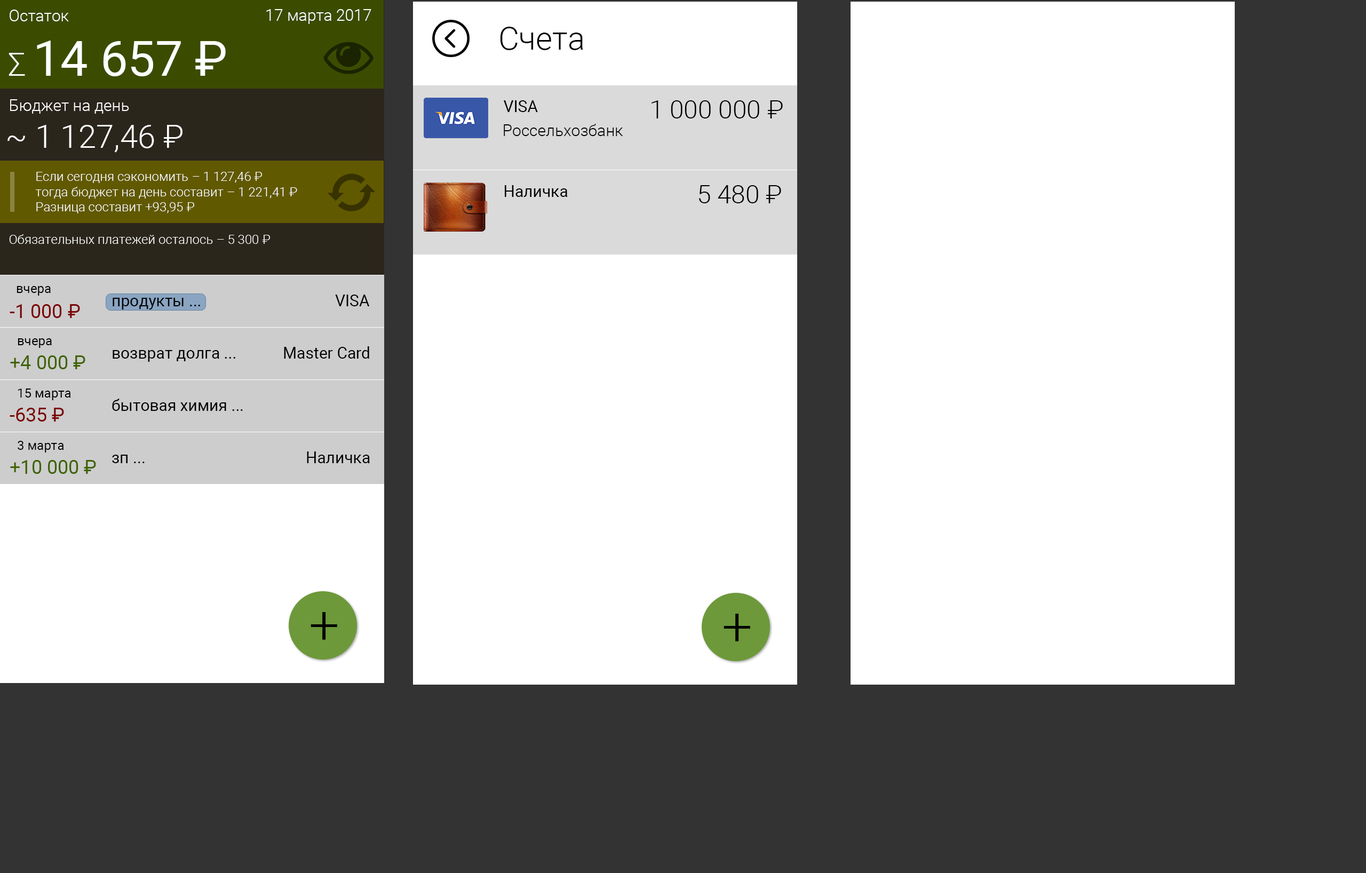
<style>
.page{position:relative;width:1366px;height:873px;background:#ffffff}
.page>*{position:absolute;margin:0}
.t1{font:16px "Roboto-Light";color:#ffffff}
.t2{font:32px "Roboto-Light";color:#000000}
.t3{font:49.1px "Roboto-Regular";color:#ffffff}
.t4{font:32px "Roboto-Light";color:#ffffff}
.t5{font:16px "Roboto-Regular";color:#000000}
.t6{font:25.6px "Roboto-Light";color:#000000}
.t7{font:16px "Roboto-Light";color:#000000}
.t8{font:12.8px "Roboto-Light";color:#ffffff}
.t9{font:12.8px "Roboto-Regular";color:#000000}
.t10{font:19.2px "Roboto-Regular";color:#7b0000}
.t11{font:19.2px "Roboto-Regular";color:#3f6300}
</style>
<div class="page">
<p class="t1" style="left:10px;top:10px;width:59px;height:11px">Остаток</p>
<p class="t1" style="left:266px;top:9px;width:105px;height:15px">17 марта 2017</p>
<p class="t2" style="left:500px;top:27px;width:83px;height:23px">Счета</p>
<p class="t3" style="left:37px;top:41px;width:189px;height:35px">14 657 ₽</p>
<p class="t4" style="left:9px;top:53px;width:16px;height:23px">Σ</p>
<p class="t1" style="left:10px;top:99px;width:119px;height:15px">Бюджет на день</p>
<p class="t5" style="left:503px;top:100px;width:35px;height:12px">VISA</p>
<p class="t6" style="left:652px;top:100px;width:131px;height:18px">1 000 000 ₽</p>
<p class="t4" style="left:38px;top:125px;width:144px;height:28px">1 127,46 ₽</p>
<p class="t7" style="left:504px;top:124px;width:119px;height:12px">Россельхозбанк</p>
<p class="t4" style="left:7px;top:136px;width:18px;height:5px">~</p>
<p class="t8" style="left:35px;top:172px;width:262px;height:41px">Если сегодня сэкономить – 1 127,46 ₽<br>тогда бюджет на день составит – 1 221,41 ₽<br>Разница составит +93,95 ₽</p>
<p class="t5" style="left:505px;top:185px;width:63px;height:12px">Наличка</p>
<p class="t6" style="left:698px;top:185px;width:83px;height:18px">5 480 ₽</p>
<p class="t8" style="left:9px;top:234px;width:261px;height:10px">Обязательных платежей осталось – 5 300 ₽</p>
<p class="t9" style="left:17px;top:286px;width:34px;height:10px">вчера</p>
<p class="t10" style="left:10px;top:304px;width:70px;height:14px">-1 000 ₽</p>
<p class="t5" style="left:113px;top:298px;width:87px;height:11px">продукты ...</p>
<p class="t5" style="left:335px;top:295px;width:35px;height:11px">VISA</p>
<p class="t9" style="left:18px;top:338px;width:34px;height:10px">вчера</p>
<p class="t5" style="left:113px;top:350px;width:122px;height:12px">возврат долга ...</p>
<p class="t5" style="left:284px;top:346px;width:85px;height:13px">Master Card</p>
<p class="t11" style="left:10px;top:355px;width:75px;height:14px">+4 000 ₽</p>
<p class="t9" style="left:18px;top:388px;width:53px;height:12px">15 марта</p>
<p class="t5" style="left:112px;top:399px;width:131px;height:12px">бытовая химия ...</p>
<p class="t10" style="left:10px;top:408px;width:54px;height:14px">-635 ₽</p>
<p class="t9" style="left:18px;top:441px;width:46px;height:11px">3 марта</p>
<p class="t11" style="left:10px;top:460px;width:86px;height:14px">+10 000 ₽</p>
<p class="t5" style="left:112px;top:455px;width:33px;height:8px">зп ...</p>
<p class="t5" style="left:307px;top:451px;width:63px;height:12px">Наличка</p>
</div>
